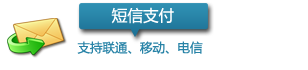
<style>
.page{position:relative;width:308px;height:70px;background:#ffffff}
.page>*{position:absolute;margin:0}
.t1{font:15.6px "MicrosoftYaHei";color:#ffffff}
.t2{font:12.5px "MicrosoftYaHei";color:#2883a7}
</style>
<div class="page">
<p class="t1" style="left:111px;top:7px;width:63px;height:17px">短信支付</p>
<p class="t2" style="left:77px;top:41px;width:126px;height:13px">支持联通、移动、电信</p>
</div>
